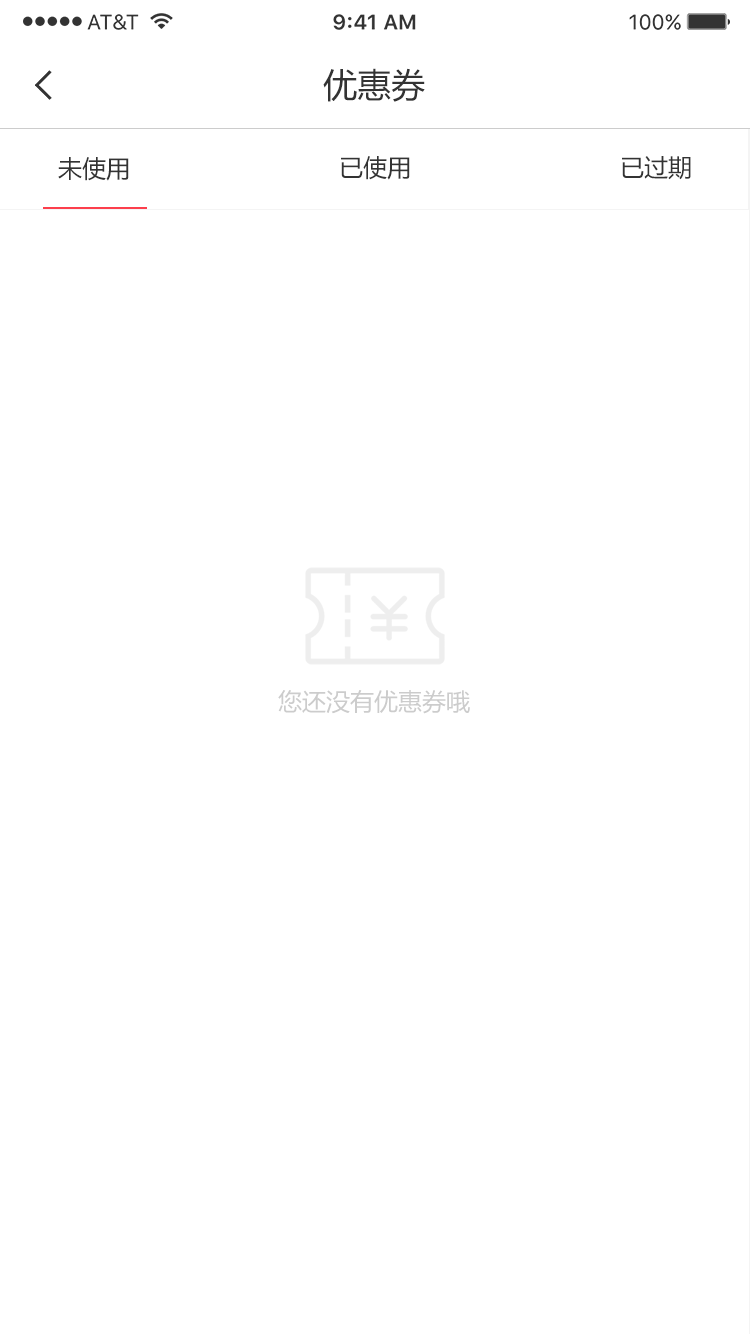
<style>
.page{position:relative;width:750px;height:1334px;background:#ffffff}
.page>*{position:absolute;margin:0}
.t1{font:34px "MicrosoftYaHei";color:#333333}
.t2{font:24px "MicrosoftYaHei";color:#333333}
.t3{font:24px "MicrosoftYaHei";color:#cccccc}
</style>
<div class="page">
<p class="t1" style="left:323px;top:68px;width:102px;height:34px">优惠券</p>
<p class="t2" style="left:58px;top:157px;width:71px;height:24px">未使用</p>
<p class="t2" style="left:341px;top:156px;width:69px;height:24px">已使用</p>
<p class="t2" style="left:622px;top:156px;width:69px;height:24px">已过期</p>
<p class="t3" style="left:278px;top:690px;width:192px;height:24px">您还没有优惠券哦</p>
</div>
